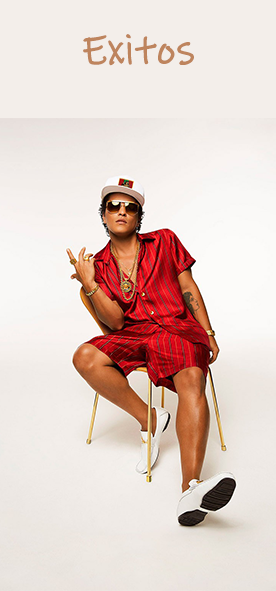
<style>
.page{position:relative;width:276px;height:591px;background:#f3eeea}
.page>*{position:absolute;margin:0}
.t1{font:41.7px "InkFree";color:#be845d;font-weight:bold}
</style>
<div class="page">
<p class="t1" style="left:83px;top:34px;width:111px;height:32px">Exitos</p>
</div>
